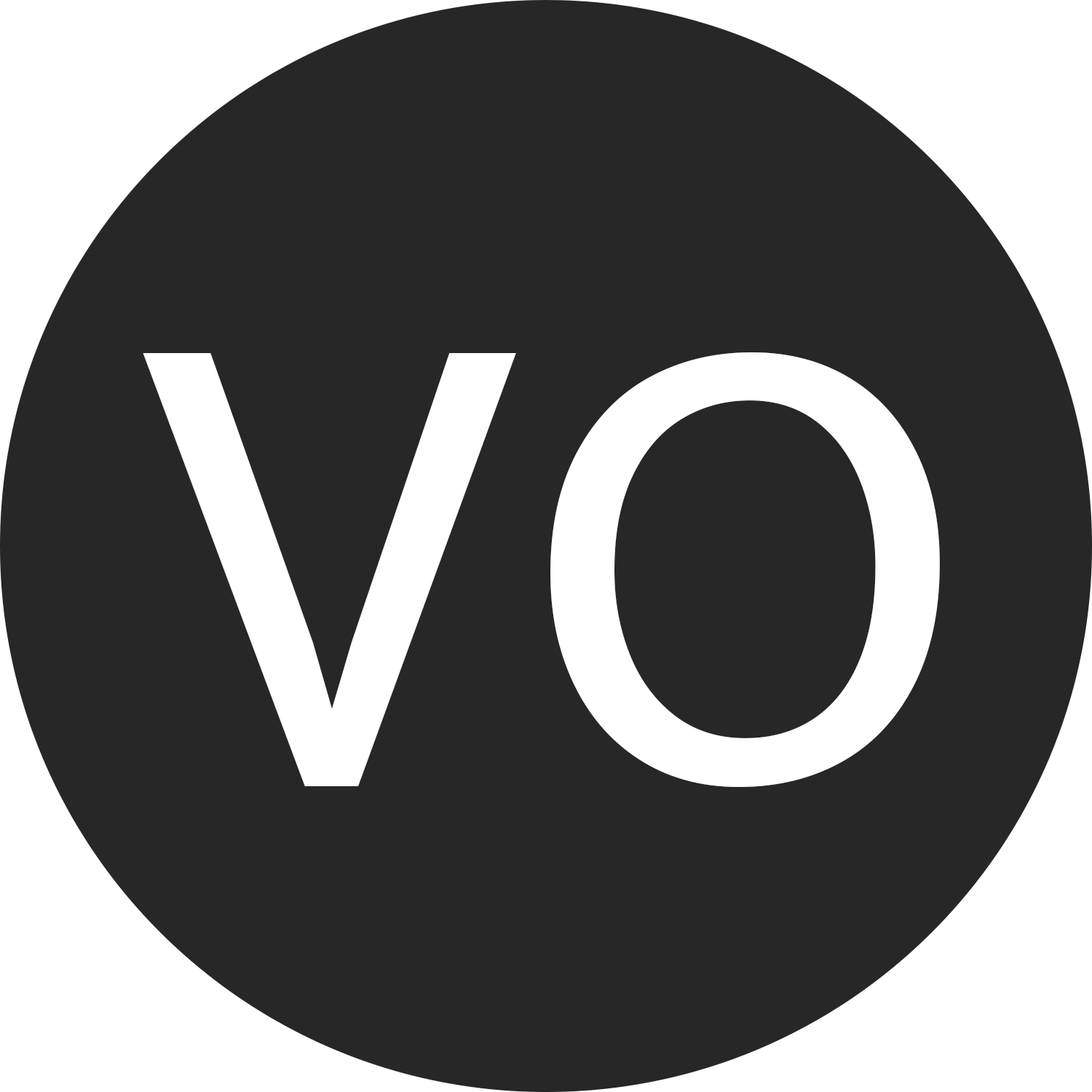
<style>
.page{position:relative;width:1092px;height:1092px;background:#272727}
.page>*{position:absolute;margin:0}
.t1{font:582.4px "MerriweatherSans-Regular";color:#ffffff}
</style>
<div class="page">
<p class="t1" style="left:143px;top:352px;width:797px;height:435px">VO</p>
</div>
